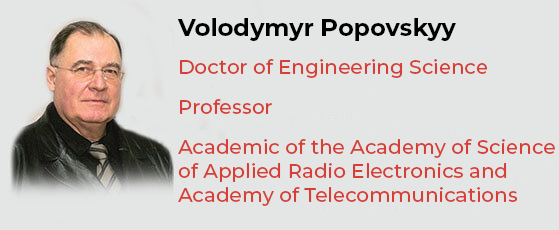
<style>
.page{position:relative;width:559px;height:230px;background:#e4e6e5}
.page>*{position:absolute;margin:0}
.t1{font:20px/24px "Montserrat-Medium";color:#d73e37}
.t2{font:24px "Montserrat-Bold";color:#000000}
.t3{font:20px/22px "Montserrat-Medium";color:#d73e37}
</style>
<div class="page">
<p class="t1" style="left:177px;top:18px;width:378px;height:188px"><span class="t2">Volodymyr Popovskyy<br><br></span><span class="t3">Doctor of Engineering Science<br><br>Professor<br><br></span>Academic of the Academy of Science <br>of Applied Radio Electronics and<br>Academy of Telecommunications</p>
</div>
